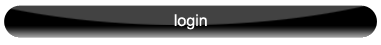
<style>
.page{position:relative;width:381px;height:45px;background:#ffffff}
.page>*{position:absolute;margin:0}
.t1{font:16px "ArialMT";color:#ffffff}
</style>
<div class="page">
<p class="t1" style="left:174px;top:14px;width:33px;height:16px">login</p>
</div>
